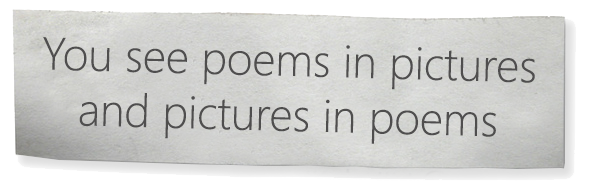
<style>
.page{position:relative;width:600px;height:183px}
.page>*{position:absolute;margin:0}
.t1{font:45.8px "SegoeUI-Light";color:#4f4e4e}
</style>
<div class="page">
<p class="t1" style="left:43px;top:37px;width:492px;height:107px;text-align:center;rotate:2deg">You see poems in pictures<br>and pictures in poems</p>
</div>
